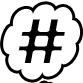
<style>
.page{position:relative;width:83px;height:83px;background:#ffffff}
.page>*{position:absolute;margin:0}
.t1{font:71.2px "Bauhaus93";letter-spacing:-0.025em;scale:1.27 1}
</style>
<div class="page">
<p class="t1" style="left:16px;top:17px;width:52px;height:48px">#</p>
</div>
